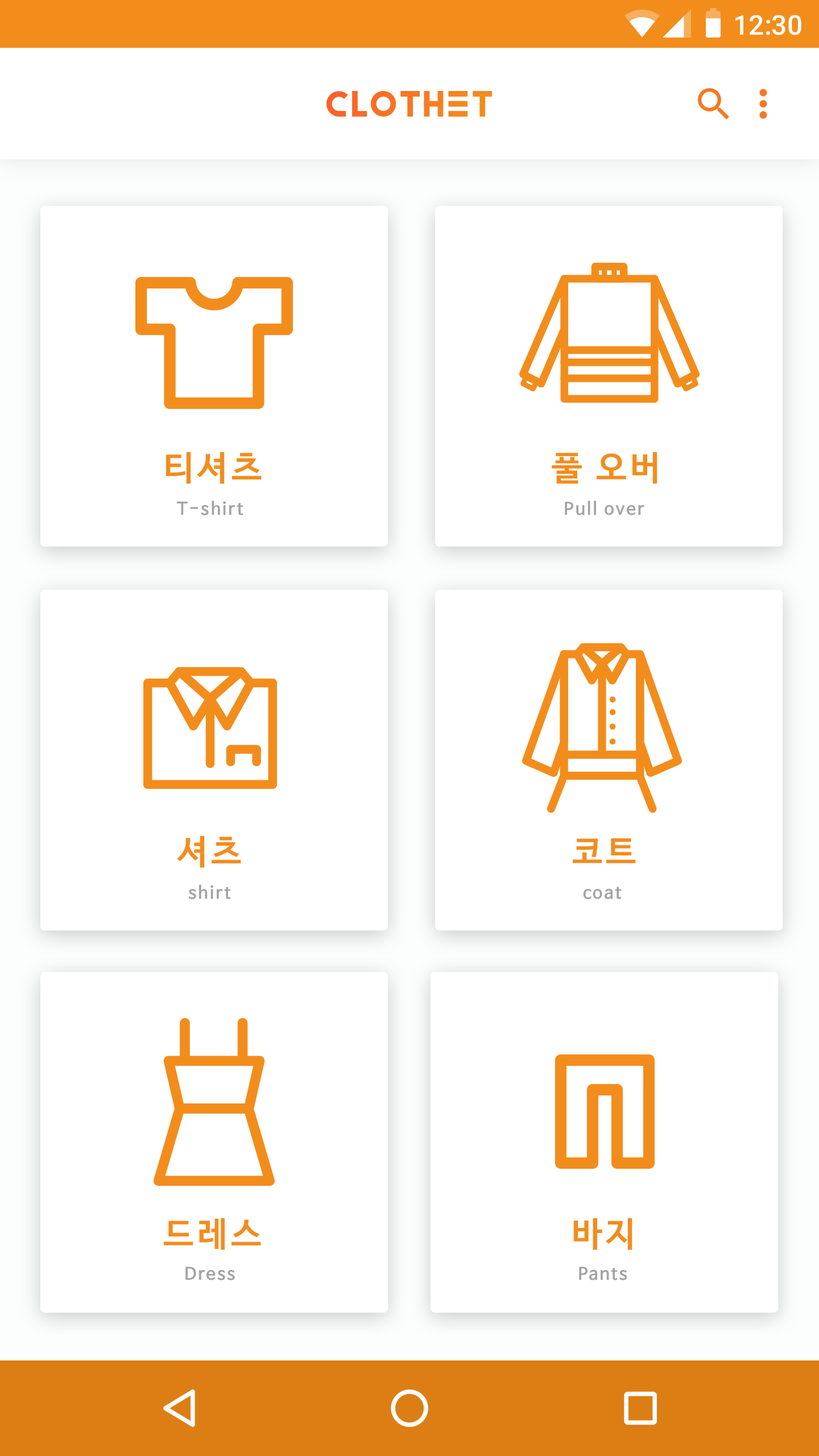
<style>
.page{position:relative;width:819px;height:1456px;background:#ffffff}
.page>*{position:absolute;margin:0}
.t1{font:27.3px "Roboto-Medium";color:#ffffff}
.t2{font:34.1px "NanumBarunGothicBold";letter-spacing:0.1em;color:#f28d1c}
.t3{font:17.1px "NanumBarunGothicBold";letter-spacing:0.1em;color:#a3a3a3}
</style>
<div class="page">
<p class="t1" style="left:735px;top:15px;width:66px;height:20px">12:30</p>
<p class="t2" style="left:166px;top:452px;width:96px;height:32px">티셔츠</p>
<p class="t2" style="left:552px;top:452px;width:105px;height:32px">풀 오버</p>
<p class="t3" style="left:177px;top:500px;width:66px;height:15px">T-shirt</p>
<p class="t3" style="left:565px;top:500px;width:79px;height:15px">Pull over</p>
<p class="t2" style="left:177px;top:835px;width:64px;height:33px">셔츠</p>
<p class="t2" style="left:573px;top:838px;width:63px;height:25px">코트</p>
<p class="t3" style="left:189px;top:884px;width:42px;height:15px">shirt</p>
<p class="t3" style="left:583px;top:887px;width:39px;height:12px">coat</p>
<p class="t2" style="left:164px;top:1218px;width:97px;height:32px">드레스</p>
<p class="t2" style="left:573px;top:1218px;width:59px;height:32px">바지</p>
<p class="t3" style="left:185px;top:1267px;width:50px;height:13px">Dress</p>
<p class="t3" style="left:579px;top:1267px;width:48px;height:13px">Pants</p>
</div>
